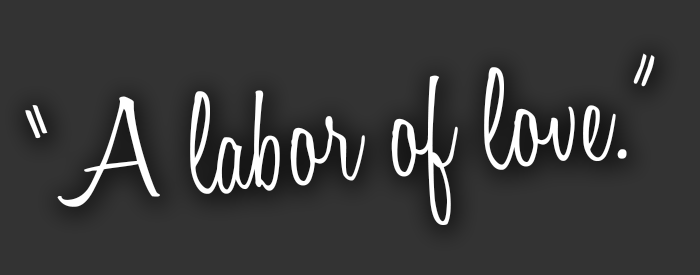
<style>
.page{position:relative;width:700px;height:275px;background:#333333}
.page>*{position:absolute;margin:0}
.t1{font:147.8px "HoneyScript-Light";color:#ffffff}
</style>
<div class="page">
<p class="t1" style="left:25px;top:53px;width:630px;height:172px;rotate:-5deg">“A labor of love.”</p>
</div>
